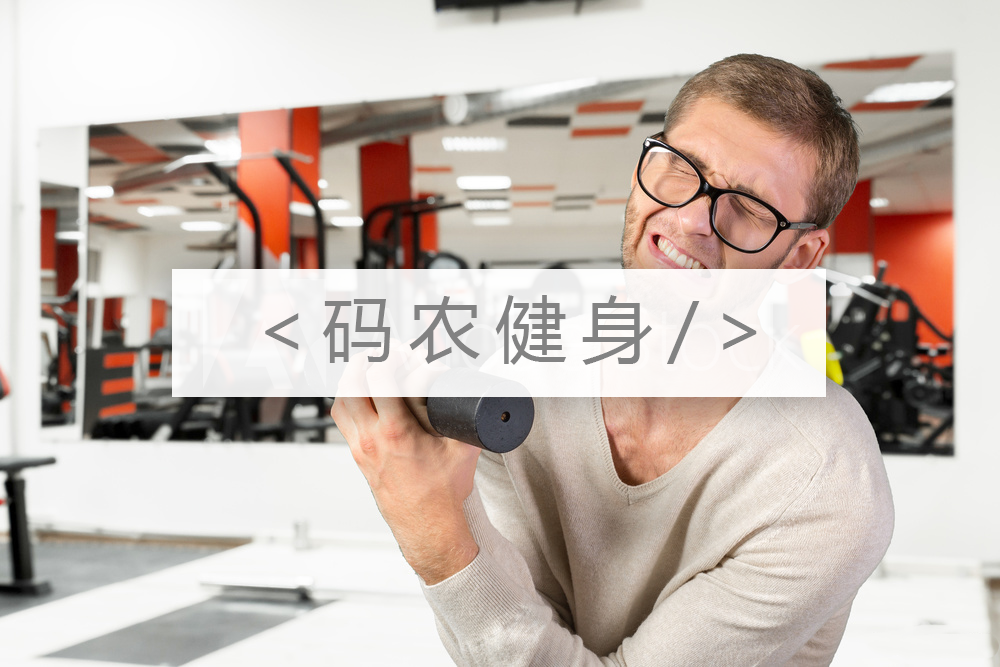
<style>
.page{position:relative;width:1000px;height:667px}
.page>*{position:absolute;margin:0}
.t1{font:72px "MicrosoftYaHei";letter-spacing:0.2em;color:#828282;text-transform:uppercase}
</style>
<div class="page">
<p class="t1" style="left:265px;top:295px;width:492px;height:70px">&lt;码农健身/&gt;</p>
</div>
